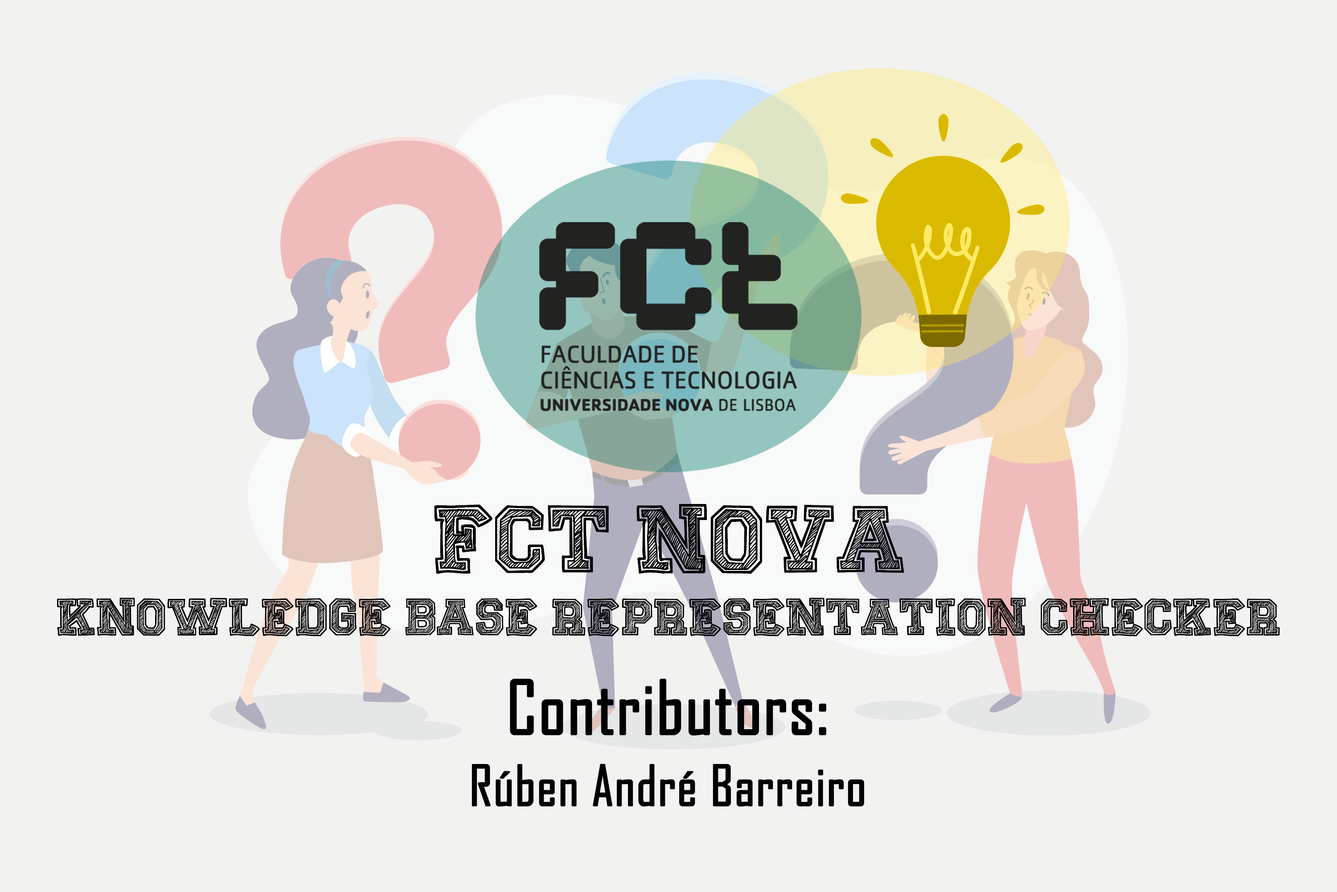
<style>
.page{position:relative;width:1337px;height:892px;background:#f2f2f1}
.page>*{position:absolute;margin:0}
.t1{font:53.5px/62.4px "SketchCollege";color:#000000}
.t2{font:98.1px/98.1px "SketchCollege";color:#000000}
.t3{font:53.5px/71.3px "AgencyFB-Reg";color:#000000;font-weight:bold}
.t4{font:71.3px/71.3px "AgencyFB-Reg";color:#000000;font-weight:bold}
</style>
<div class="page">
<p class="t1" style="left:57px;top:504px;width:1223px;height:132px;text-align:center"><span class="t2">FCT NOVA<br></span>Knowledge Base Representation Checker</p>
<p class="t3" style="left:472px;top:678px;width:392px;height:128px;text-align:center"><span class="t4">Contributors:<br></span>Rúben André Barreiro</p>
</div>
